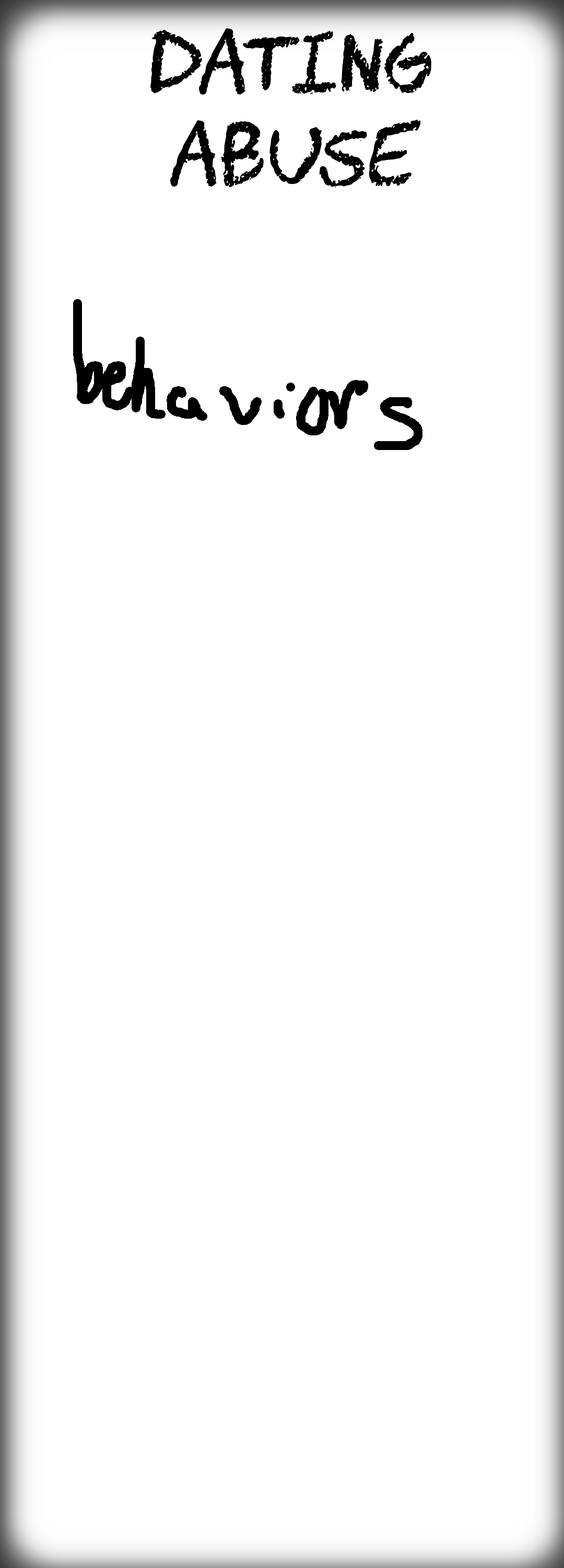
<style>
.page{position:relative;width:564px;height:1568px;background:#ffffff}
.page>*{position:absolute;margin:0}
.t1{font:76.8px "CHAWP";color:#000000}
</style>
<div class="page">
<p class="t1" style="left:151px;top:28px;width:281px;height:160px;text-align:center">Dating <br>Abuse</p>
</div>
